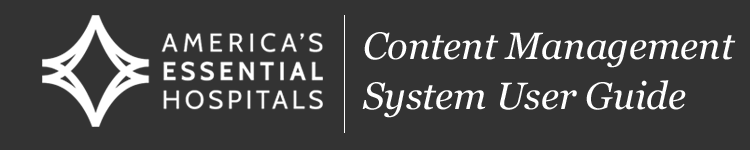
<style>
.page{position:relative;width:750px;height:150px;background:#333333}
.page>*{position:absolute;margin:0}
.t1{font:38px/40px "Georgia-Italic";color:#ffffff}
</style>
<div class="page">
<p class="t1" style="left:362px;top:32px;width:374px;height:86px">Content Management<br>System User Guide</p>
</div>
